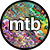
<style>
.page{position:relative;width:50px;height:50px}
.page>*{position:absolute;margin:0}
.t1{font:17.5px "Helvetica-Bold";color:#fdfefd}
</style>
<div class="page">
<p class="t1" style="left:10px;top:17px;width:31px;height:14px">mtb</p>
</div>
